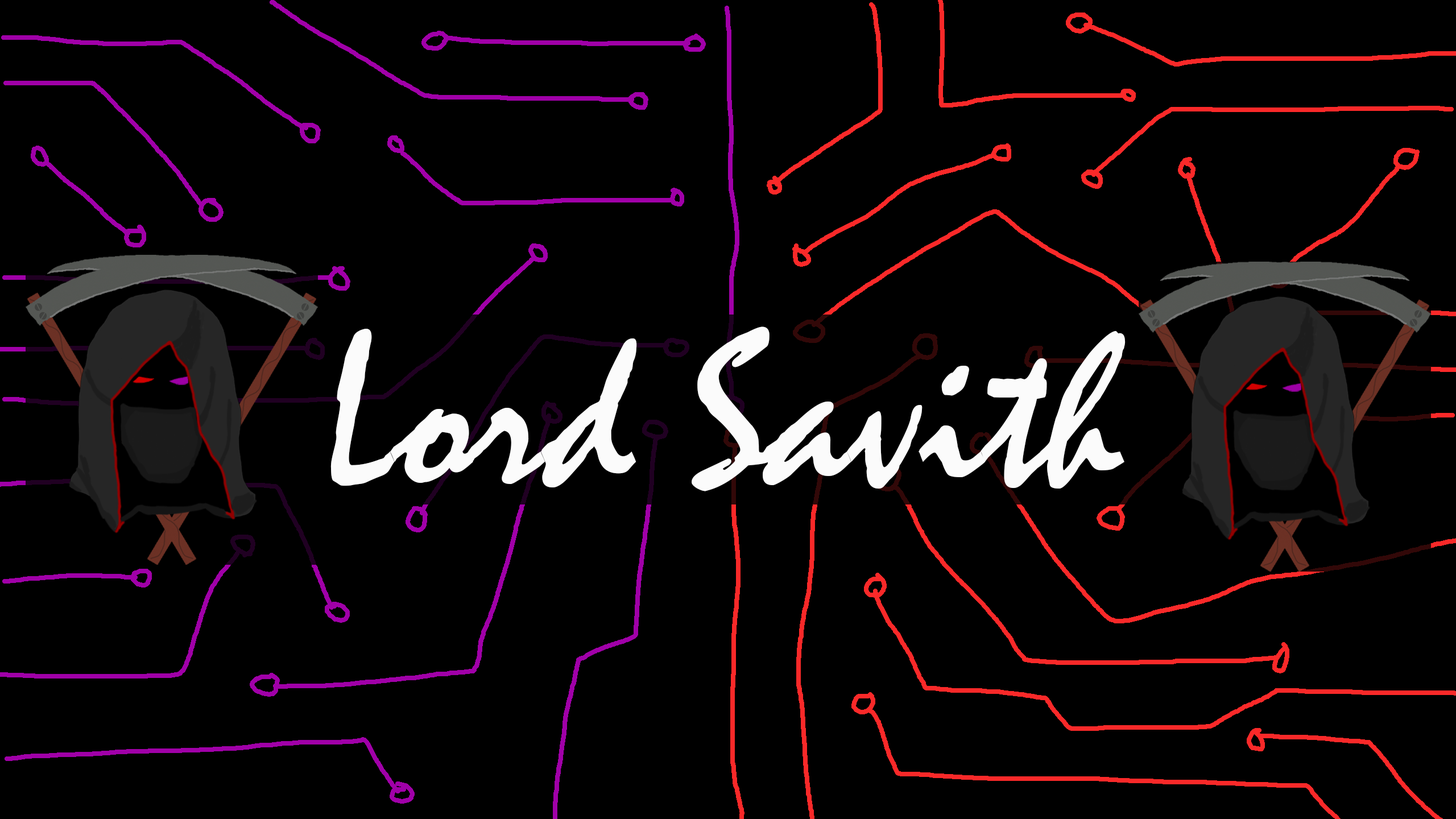
<style>
.page{position:relative;width:1456px;height:819px;background:#000000}
.page>*{position:absolute;margin:0}
.t1{font:222.2px "Mistral";color:#fbfbfb}
</style>
<div class="page">
<p class="t1" style="left:330px;top:326px;width:796px;height:165px">Lord Savith</p>
</div>
